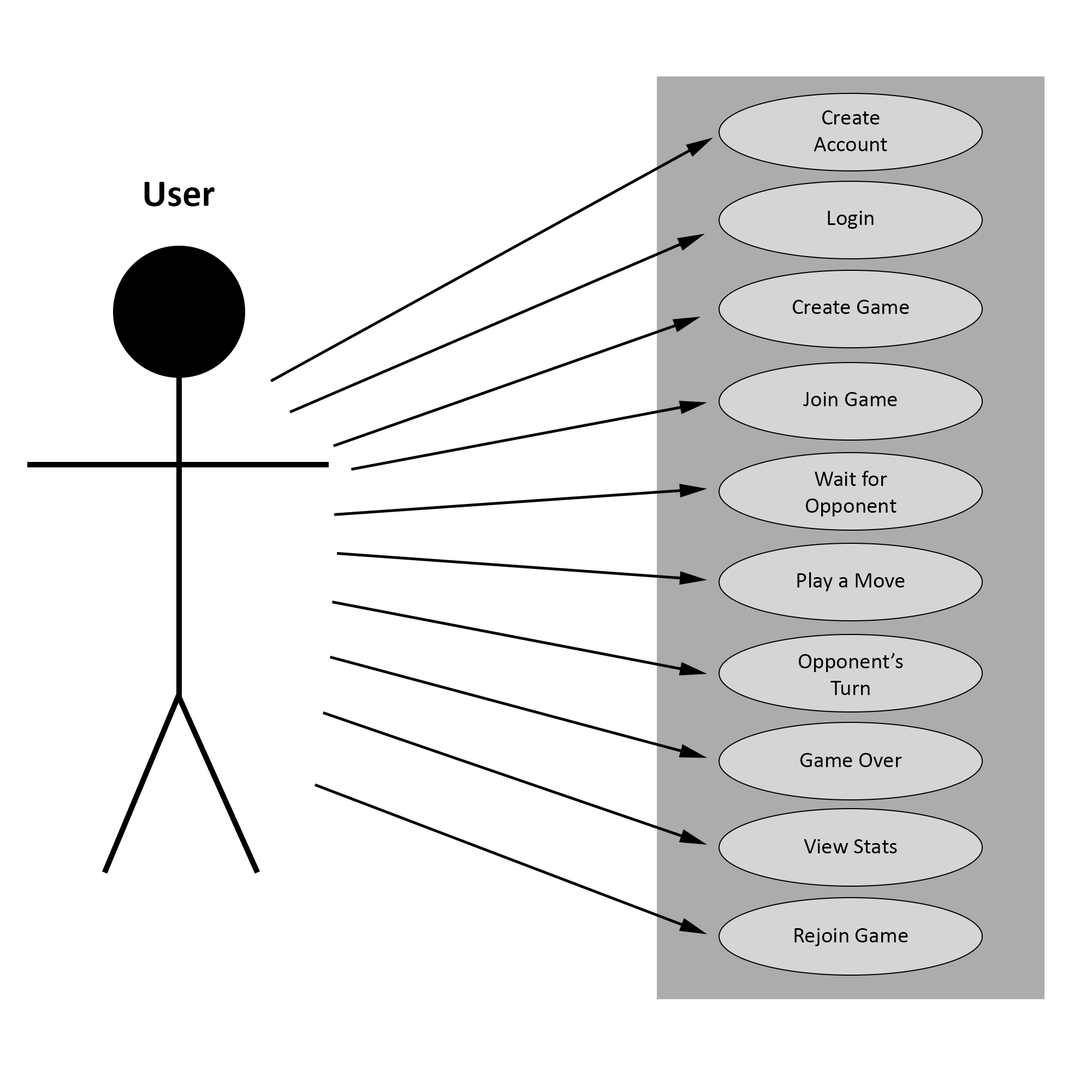
<style>
.page{position:relative;width:1092px;height:1092px;background:#ffffff}
.page>*{position:absolute;margin:0}
.t1{font:22.4px "Calibri";color:#000000}
.t2{font:38.2px "Calibri-Bold";color:#000000}
</style>
<div class="page">
<p class="t1" style="left:814px;top:110px;width:73px;height:41px;text-align:center">Create<br>Account</p>
<p class="t2" style="left:144px;top:182px;width:71px;height:24px">User</p>
<p class="t1" style="left:828px;top:211px;width:46px;height:18px">Login</p>
<p class="t1" style="left:793px;top:300px;width:116px;height:14px">Create Game</p>
<p class="t1" style="left:803px;top:392px;width:94px;height:14px">Join Game</p>
<p class="t1" style="left:806px;top:471px;width:91px;height:46px;text-align:center">Wait for <br>Opponent</p>
<p class="t1" style="left:797px;top:572px;width:108px;height:19px">Play a Move</p>
<p class="t1" style="left:799px;top:653px;width:104px;height:42px;text-align:center">Opponent’s<br>Turn</p>
<p class="t1" style="left:800px;top:753px;width:102px;height:14px">Game Over</p>
<p class="t1" style="left:804px;top:839px;width:93px;height:14px">View Stats</p>
<p class="t1" style="left:794px;top:928px;width:114px;height:18px">Rejoin Game</p>
</div>
